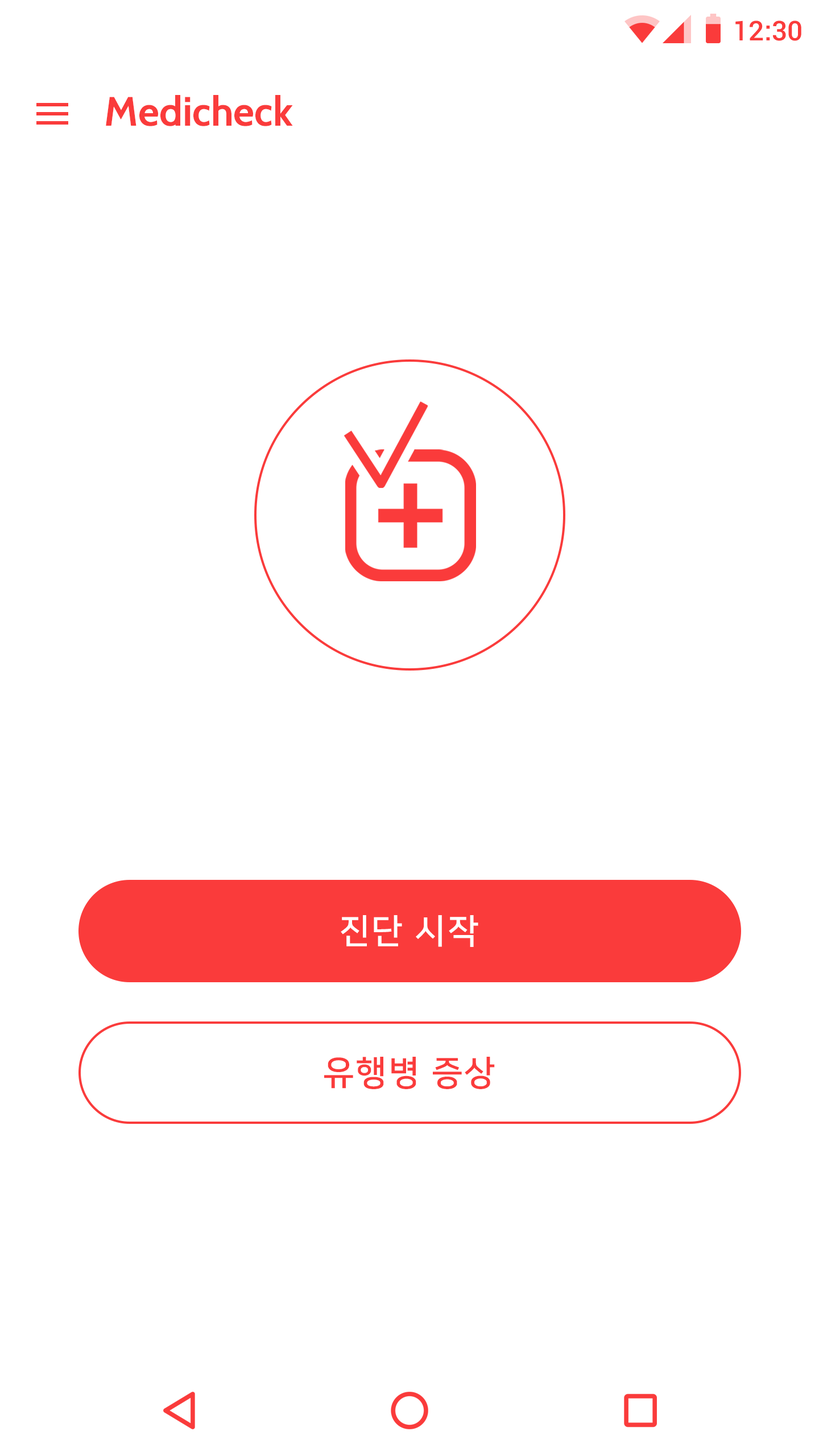
<style>
.page{position:relative;width:819px;height:1456px;background:#ffffff}
.page>*{position:absolute;margin:0}
.t1{font:27.3px "Roboto-Medium";color:#fa3b3b}
.t2{font:40.9px "Cabin-Bold";color:#fa3b3b}
.t3{font:34.1px "NanumSquareB";letter-spacing:0.05em;color:#ffffff}
.t4{font:34.1px "NanumSquareB";letter-spacing:0.05em;color:#fa3b3b}
</style>
<div class="page">
<p class="t1" style="left:735px;top:20px;width:66px;height:21px">12:30</p>
<p class="t2" style="left:106px;top:95px;width:187px;height:31px">Medicheck</p>
<p class="t3" style="left:341px;top:915px;width:137px;height:32px">진단 시작</p>
<p class="t4" style="left:324px;top:1057px;width:171px;height:32px">유행병 증상</p>
</div>
